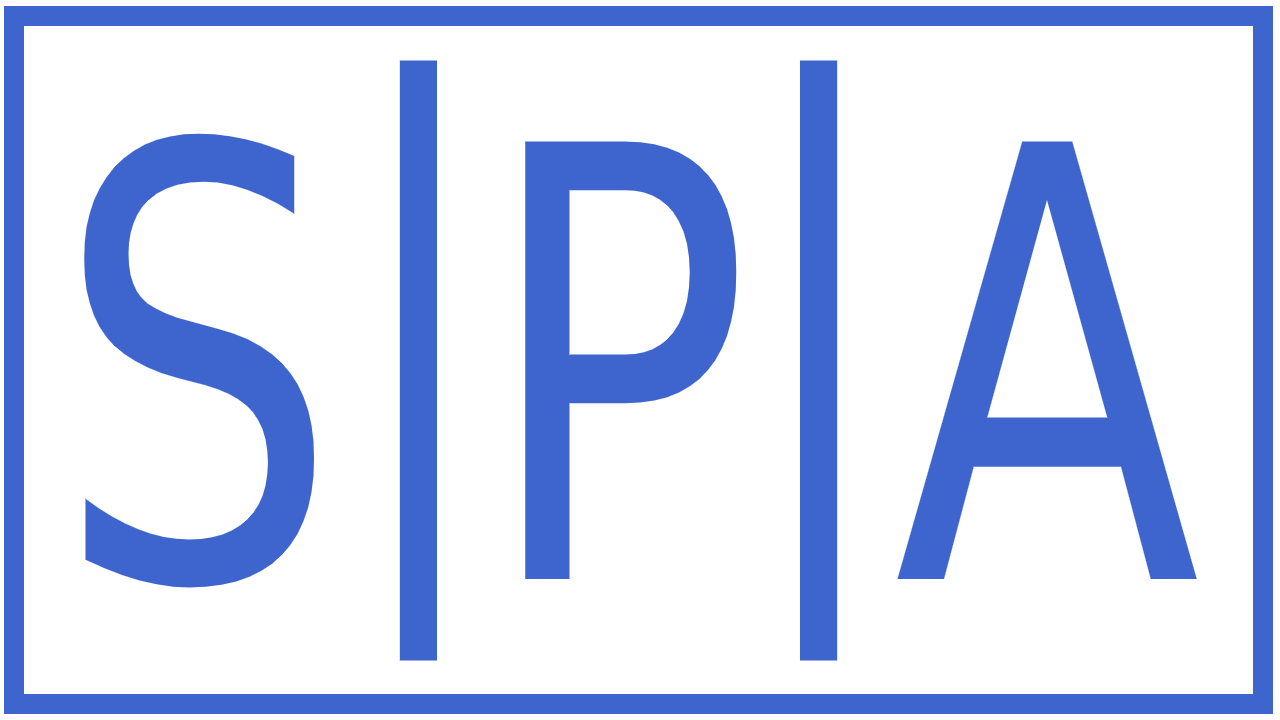
<style>
.page{position:relative;width:1280px;height:720px;background:#ffffff}
.page>*{position:absolute;margin:0}
.t1{font:600px "DejaVuSans";color:#3e65ce;scale:0.75 1}
</style>
<div class="page">
<p class="t1" style="left:399px;top:60px;width:439px;height:601px">|  |</p>
<p class="t1" style="left:84px;top:133px;width:1113px;height:455px">S P A</p>
</div>
